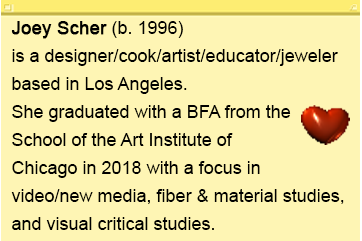
<style>
.page{position:relative;width:362px;height:241px;background:#fef5b4}
.page>*{position:absolute;margin:0}
.t1{font:18px/28px "ArialMT";color:#000000}
.t2{font:18px/28px "ArialMT";color:#000000;font-weight:bold}
</style>
<div class="page">
<p class="t1" style="left:11px;top:21px;width:333px;height:209px"><span class="t2">Joey Scher</span> (b. 1996) <br>is a designer/cook/artist/educator/jeweler <br>based in Los Angeles. <br>She graduated with a BFA from the School of the Art Institute of <br>Chicago in 2018 with a focus in <br>video/new media, fiber &amp; material studies, and visual critical studies.</p>
</div>
